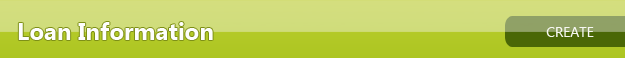
<style>
.page{position:relative;width:625px;height:58px}
.page>*{position:absolute;margin:0}
.t1{font:24px "SegoeUI-Bold";color:#fefefe}
.t2{font:14px "SegoeUI";color:#f6f7f1}
</style>
<div class="page">
<p class="t1" style="left:18px;top:22px;width:195px;height:18px">Loan Information</p>
<p class="t2" style="left:546px;top:27px;width:48px;height:10px">CREATE</p>
</div>
